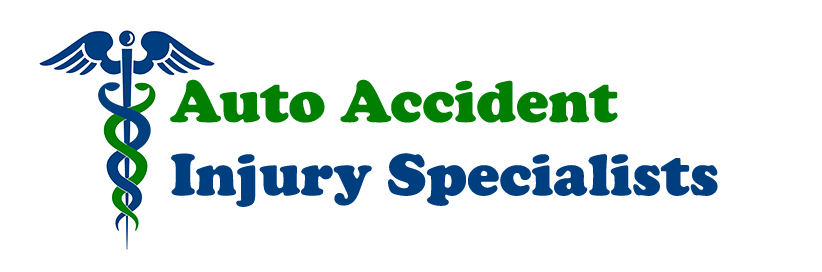
<style>
.page{position:relative;width:822px;height:272px;background:#ffffff}
.page>*{position:absolute;margin:0}
.t1{font:61.1px "CooperBlack";color:#003f7f}
.t2{font:61.1px "CooperBlack";color:#007f00}
</style>
<div class="page">
<p class="t1" style="left:170px;top:79px;width:548px;height:128px"><span class="t2">Auto Accident<br></span>Injury Specialists</p>
</div>
